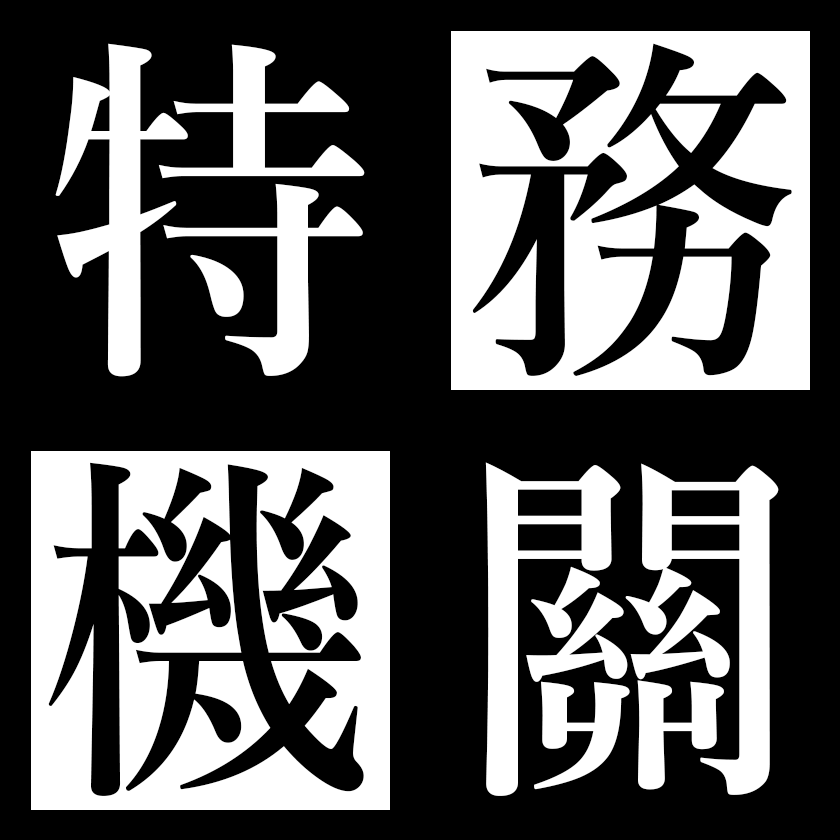
<style>
.page{position:relative;width:840px;height:840px;background:#000000}
.page>*{position:absolute;margin:0}
.t1{font:360px "YuMincho-Demibold";color:#ffffff;scale:0.92 1}
.t2{font:360px "YuMincho-Demibold";color:#000000;scale:0.92 1}
</style>
<div class="page">
<p class="t1" style="left:55px;top:43px;width:310px;height:334px">特</p>
<p class="t2" style="left:472px;top:43px;width:320px;height:333px">務</p>
<p class="t2" style="left:48px;top:462px;width:316px;height:334px">機</p>
<p class="t1" style="left:485px;top:462px;width:294px;height:334px">關</p>
</div>
